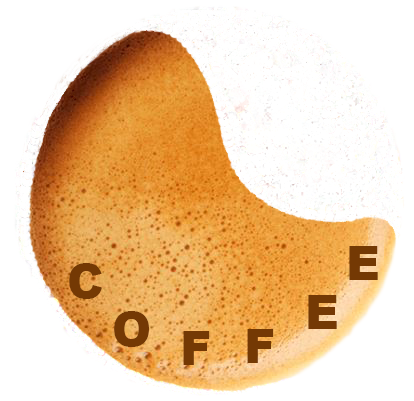
<style>
.page{position:relative;width:414px;height:401px;background:#ffffff}
.page>*{position:absolute;margin:0}
.t1{font:46.7px "Arial-Black";color:#743904}
</style>
<div class="page">
<p class="t1" style="left:349px;top:246px;width:29px;height:34px">E</p>
<p class="t1" style="left:69px;top:263px;width:33px;height:36px">C</p>
<p class="t1" style="left:308px;top:295px;width:29px;height:34px">E</p>
<p class="t1" style="left:114px;top:311px;width:35px;height:36px">O</p>
<p class="t1" style="left:247px;top:329px;width:27px;height:34px">F</p>
<p class="t1" style="left:183px;top:331px;width:27px;height:34px">F</p>
</div>
